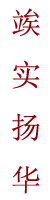
<style>
.page{position:relative;width:50px;height:200px;background:#ffffff}
.page>*{position:absolute;margin:0}
.t1{font:30px "SimSun";color:#90000a}
</style>
<div class="page">
<p class="t1" style="left:12px;top:8px;width:28px;height:186px">竢<br>实<br>扬<br>华</p>
</div>
